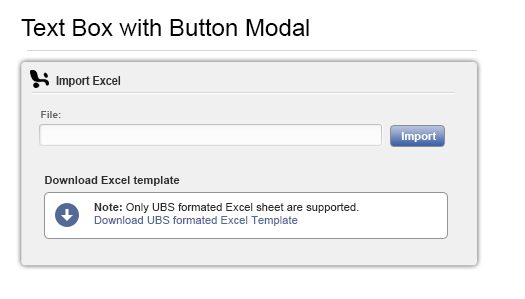
<style>
.page{position:relative;width:525px;height:299px;background:#ffffff}
.page>*{position:absolute;margin:0}
.t1{font:24px "ArialMT";color:#000000}
.t2{font:12px "Arial-BoldMT";color:#2e2e2e;scale:0.9 1}
.t3{font:10px "Arial-BoldMT";letter-spacing:0.01em;color:#646464}
.t4{font:11px "Arial-BoldMT";letter-spacing:0.01em;color:#ffffff}
.t5{font:11px "Arial-BoldMT";letter-spacing:0.01em;color:#2e2e2e}
.t6{font:11px "ArialMT";letter-spacing:0.01em;color:#2e2e2e}
.t7{font:11px "ArialMT";letter-spacing:0.01em;color:#556996}
</style>
<div class="page">
<p class="t1" style="left:21px;top:18px;width:288px;height:18px">Text Box with Button Modal</p>
<p class="t2" style="left:56px;top:76px;width:65px;height:11px">Import Excel</p>
<p class="t3" style="left:41px;top:111px;width:20px;height:7px">File:</p>
<p class="t4" style="left:401px;top:132px;width:36px;height:10px">Import</p>
<p class="t5" style="left:45px;top:176px;width:135px;height:10px">Download Excel template</p>
<p class="t6" style="left:94px;top:203px;width:265px;height:23px"><span class="t5">Note: </span>Only UBS formated Excel sheet are supported. <br><span class="t7">Download UBS formated Excel Template</span></p>
</div>
